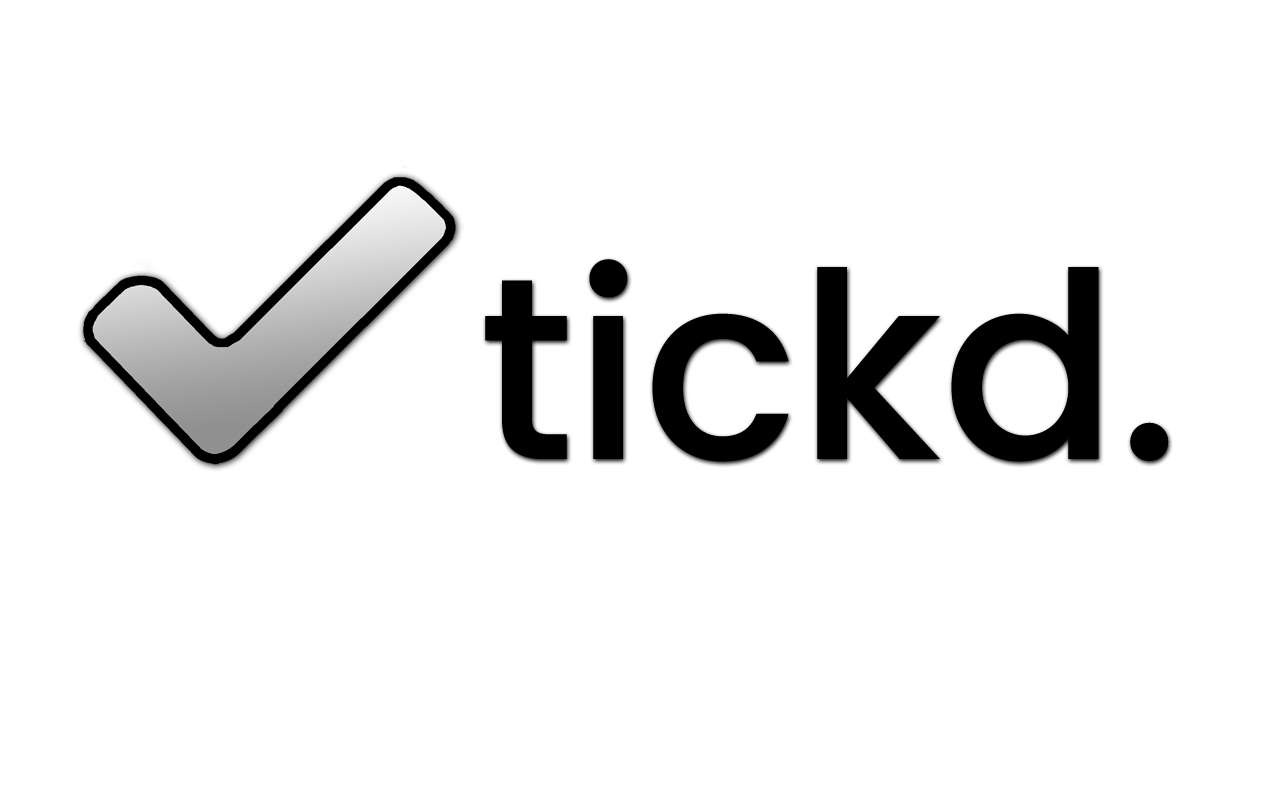
<style>
.page{position:relative;width:1280px;height:800px;background:#ffffff}
.page>*{position:absolute;margin:0}
.t1{font:259.2px "Poppins-Medium";color:#000000}
</style>
<div class="page">
<p class="t1" style="left:485px;top:259px;width:684px;height:203px">tickd.</p>
</div>
